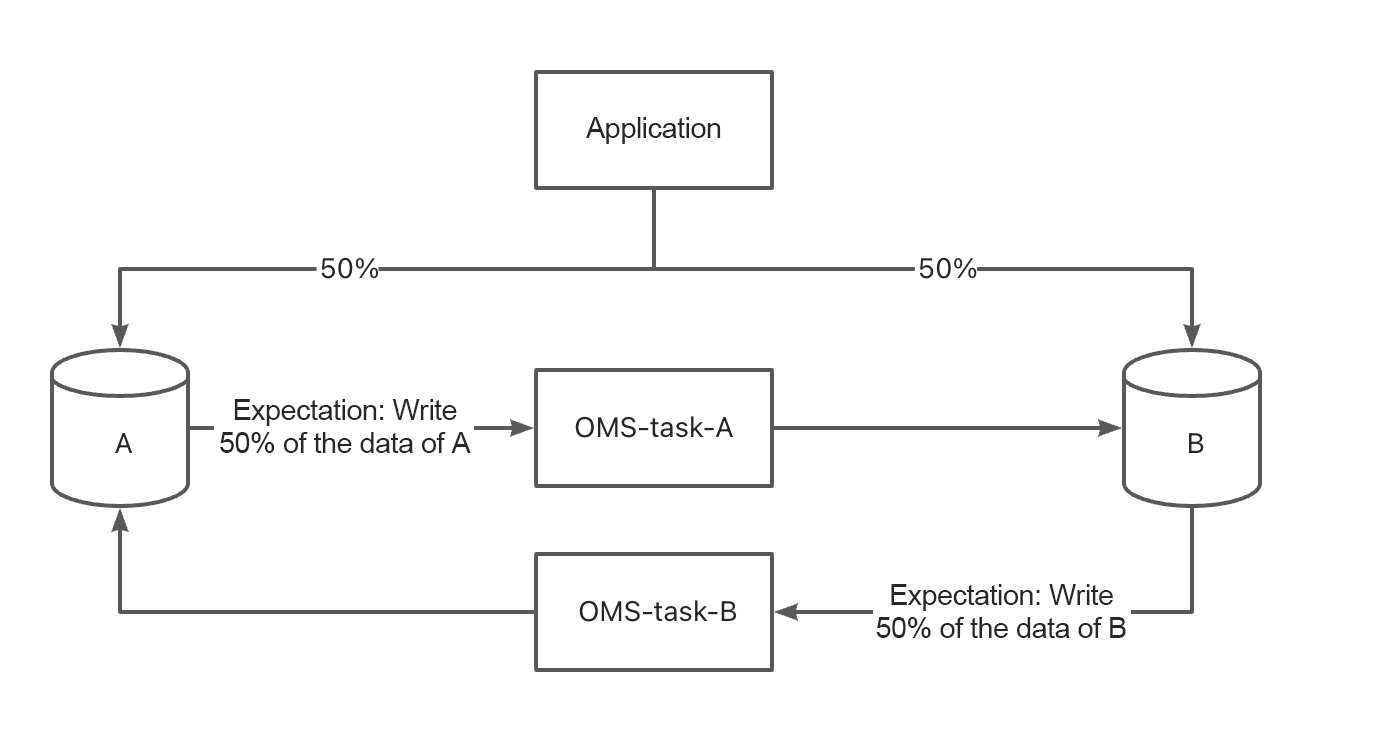
<style>
.page{position:relative;width:1387px;height:750px;background:#ffffff}
.page>*{position:absolute;margin:0}
.t1{font:29px "ArialMT";letter-spacing:-0.02em;color:#272727}
.t2{font:29px/33px "ArialMT";letter-spacing:-0.02em;color:#272727}
</style>
<div class="page">
<p class="t1" style="left:586px;top:117px;width:135px;height:27px">Application</p>
<p class="t2" style="left:220px;top:399px;width:251px;height:54px;text-align:center">Expectation: Write 50% of the data of A</p>
<p class="t2" style="left:876px;top:584px;width:250px;height:54px;text-align:center">Expectation: Write 50% of the data of B</p>
</div>
